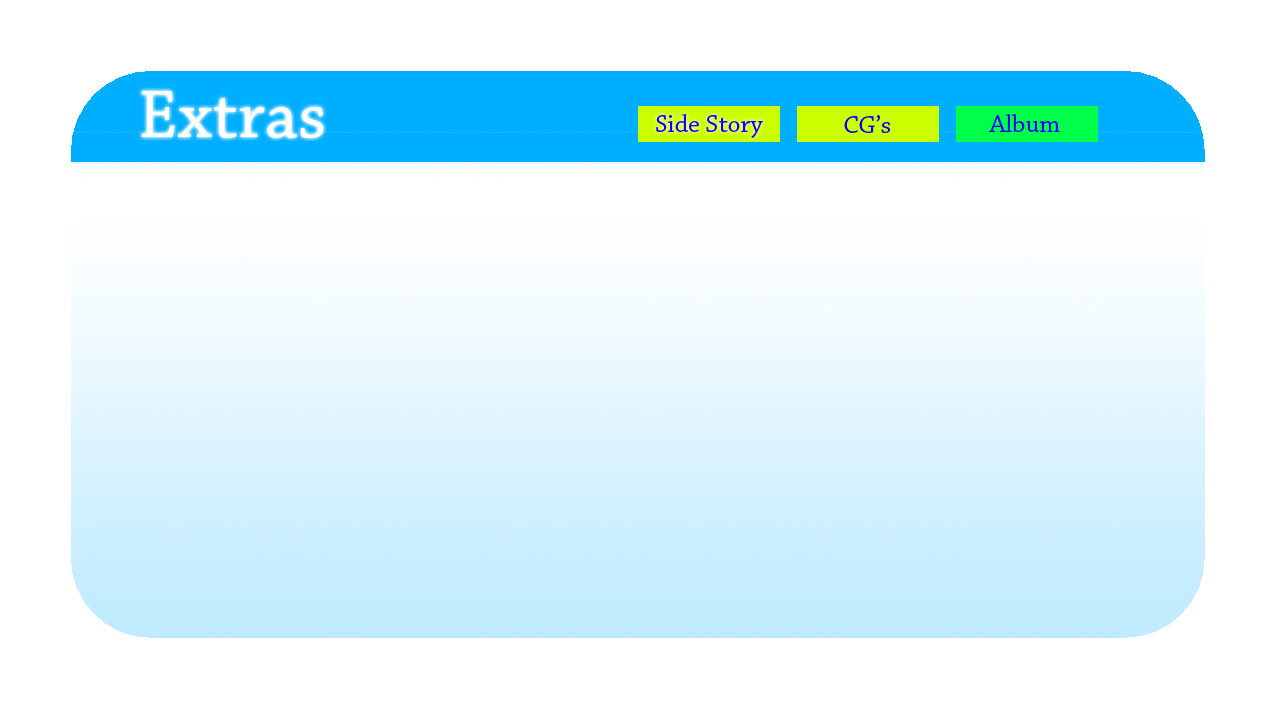
<style>
.page{position:relative;width:1280px;height:720px;background:#ffffff}
.page>*{position:absolute;margin:0}
.t1{font:26px "ChaparralPro-Regular";color:#0600ff}
</style>
<div class="page">
<p class="t1" style="left:656px;top:114px;width:107px;height:24px">Side Story</p>
<p class="t1" style="left:844px;top:115px;width:47px;height:18px">CG’s</p>
<p class="t1" style="left:989px;top:114px;width:71px;height:18px">Album</p>
</div>
